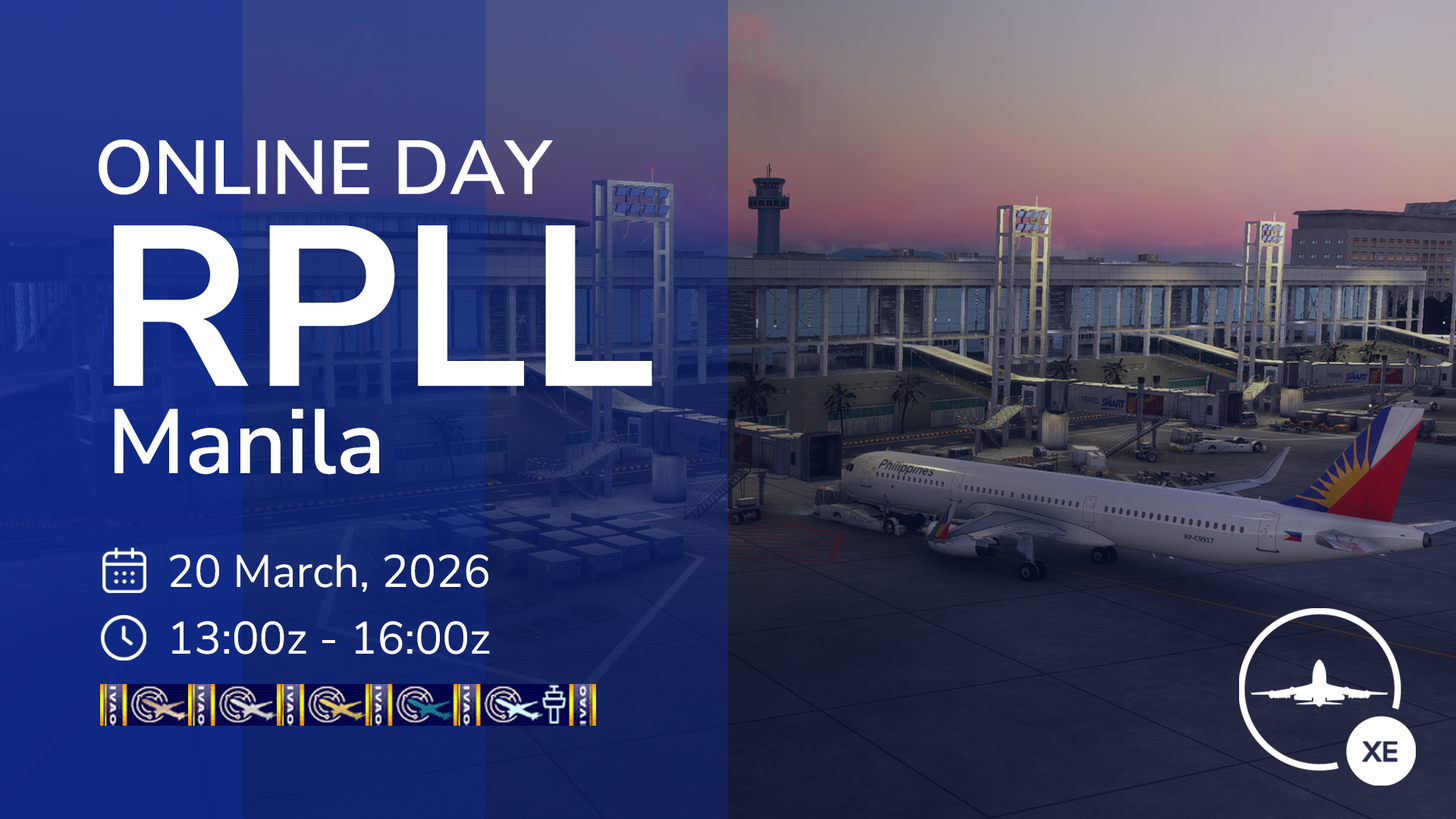
<style>
.page{position:relative;width:1456px;height:819px}
.page>*{position:absolute;margin:0}
.t1{font:75.8px "NunitoSans-SemiBold";color:#ffffff}
.t2{font:227.4px "NunitoSans-Bold";color:#ffffff}
.t3{font:90.9px "NunitoSans-SemiBold";color:#ffffff}
.t4{font:45.5px "NunitoSans-Regular";color:#ffffff}
</style>
<div class="page">
<p class="t1" style="left:99px;top:140px;width:454px;height:55px">ONLINE DAY</p>
<p class="t2" style="left:114px;top:225px;width:538px;height:161px">RPLL</p>
<p class="t3" style="left:115px;top:409px;width:264px;height:66px">Manila</p>
<p class="t4" style="left:169px;top:554px;width:319px;height:38px">20 March, 2026</p>
<p class="t4" style="left:172px;top:621px;width:318px;height:33px">13:00z - 16:00z</p>
</div>
